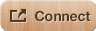
<style>
.page{position:relative;width:96px;height:31px}
.page>*{position:absolute;margin:0}
.t1{font:14px "HelveticaNeue-Bold";color:#4f391e}
</style>
<div class="page">
<p class="t1" style="left:35px;top:10px;width:56px;height:12px">Connect</p>
</div>
